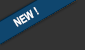
<style>
.page{position:relative;width:85px;height:50px;background:#333333}
.page>*{position:absolute;margin:0}
.t1{font:11px "ArialNarrow-Bold";color:#ffffff}
</style>
<div class="page">
<p class="t1" style="left:13px;top:7px;width:26px;height:20px;rotate:-31deg">NEW !</p>
</div>
